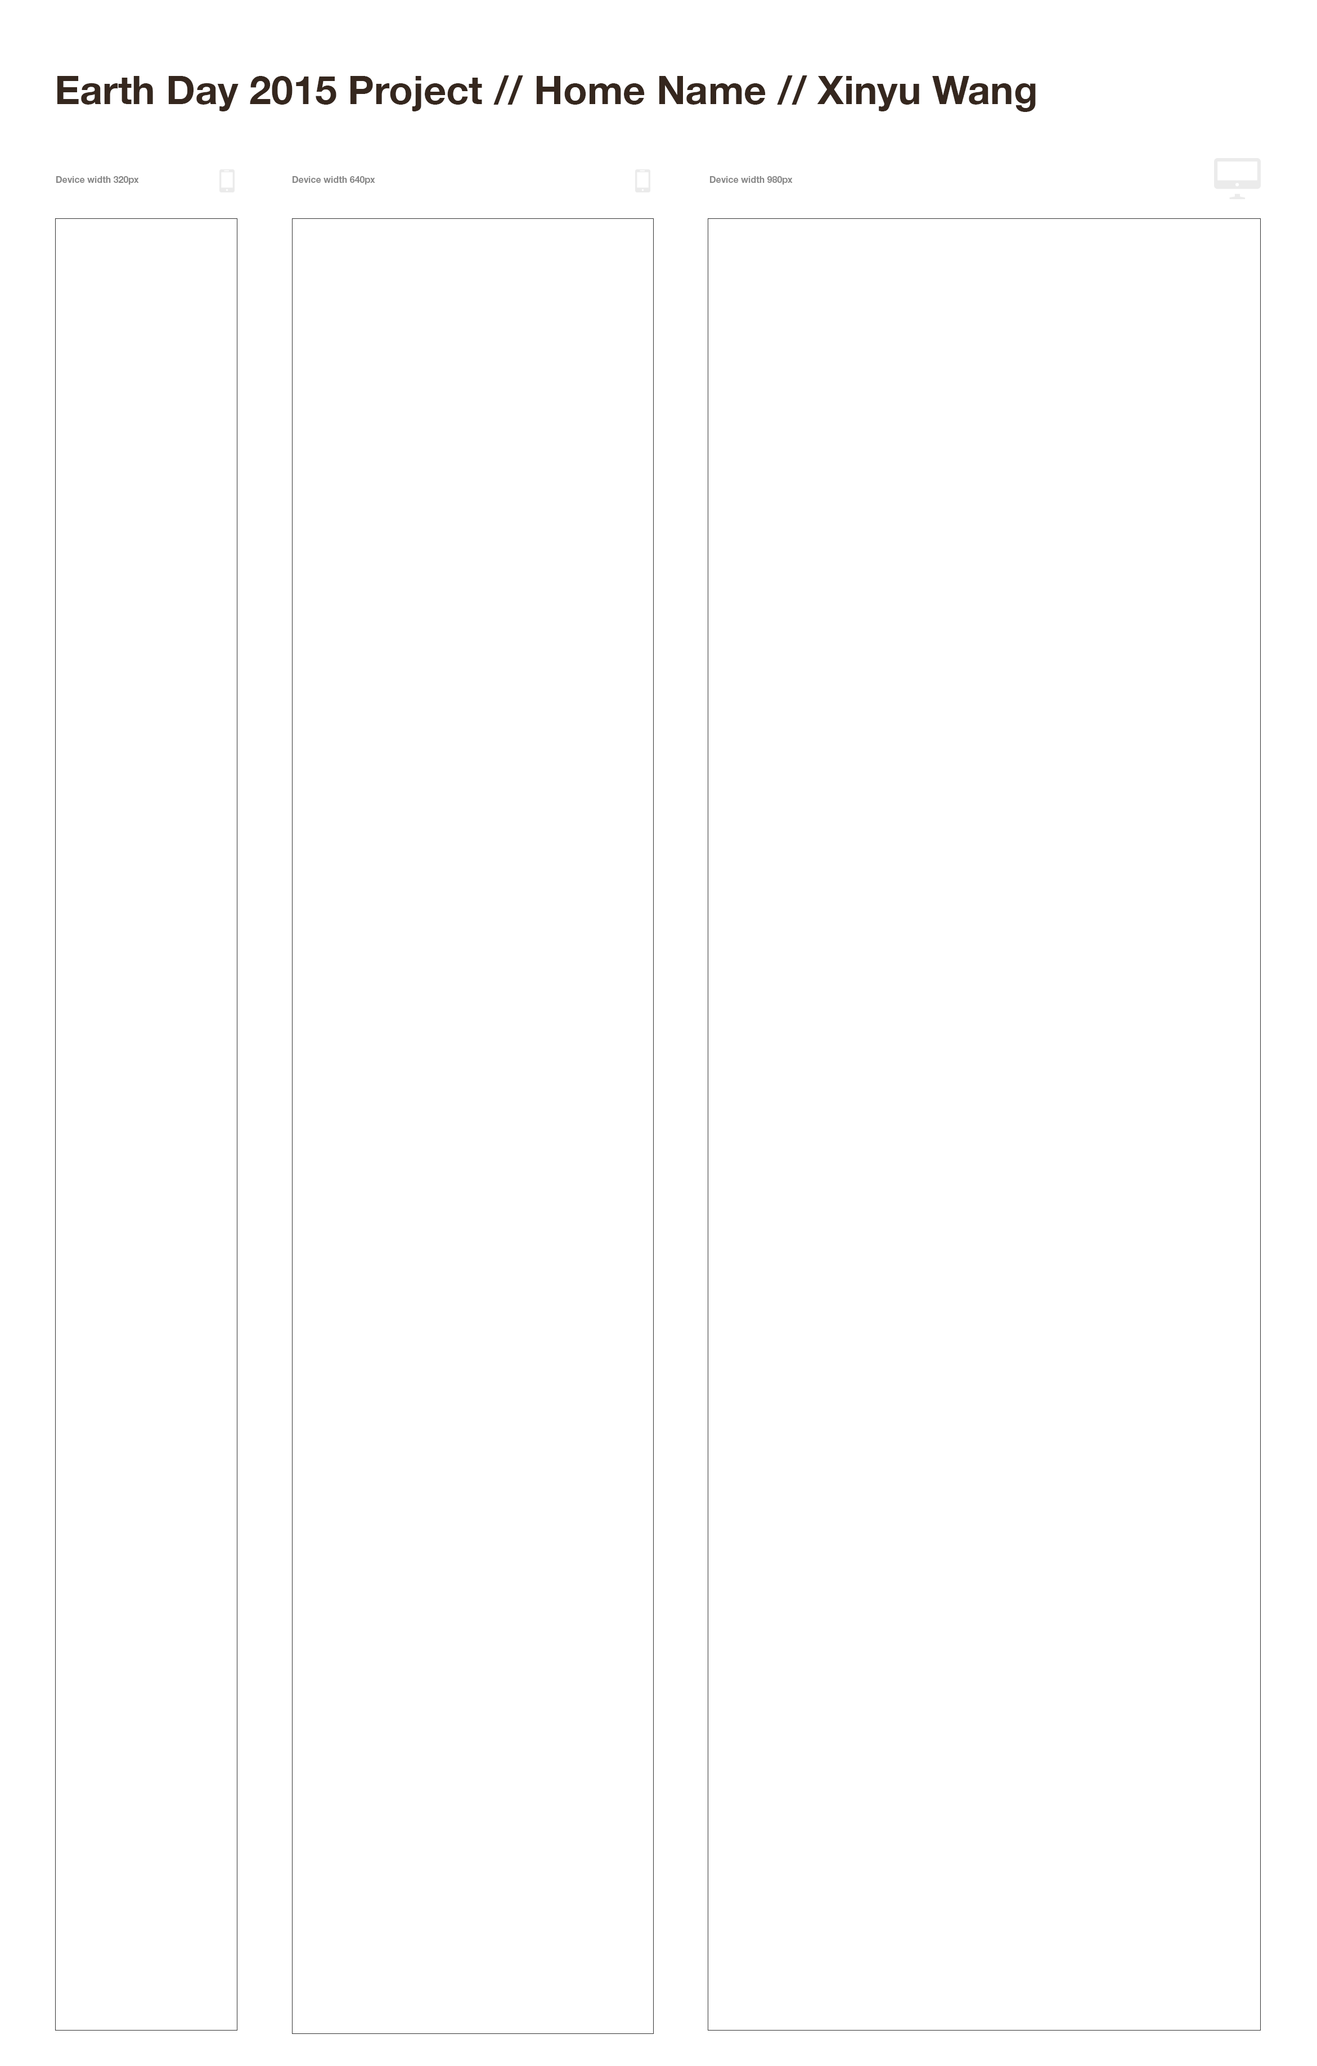
<style>
.page{position:relative;width:1317px;height:2066px;background:#ffffff}
.page>*{position:absolute;margin:0}
.t1{font:39.4px "HelveticaNeue-Bold";color:#35271e}
.t2{font:9px "HelveticaNeueLTStd-Bd";color:#878787}
</style>
<div class="page">
<p class="t1" style="left:57px;top:75px;width:979px;height:37px">Earth Day 2015 Project // Home Name // Xinyu Wang</p>
<p class="t2" style="left:56px;top:176px;width:83px;height:8px">Device width 320px</p>
<p class="t2" style="left:292px;top:176px;width:83px;height:8px">Device width 640px</p>
<p class="t2" style="left:710px;top:176px;width:83px;height:8px">Device width 980px</p>
</div>
